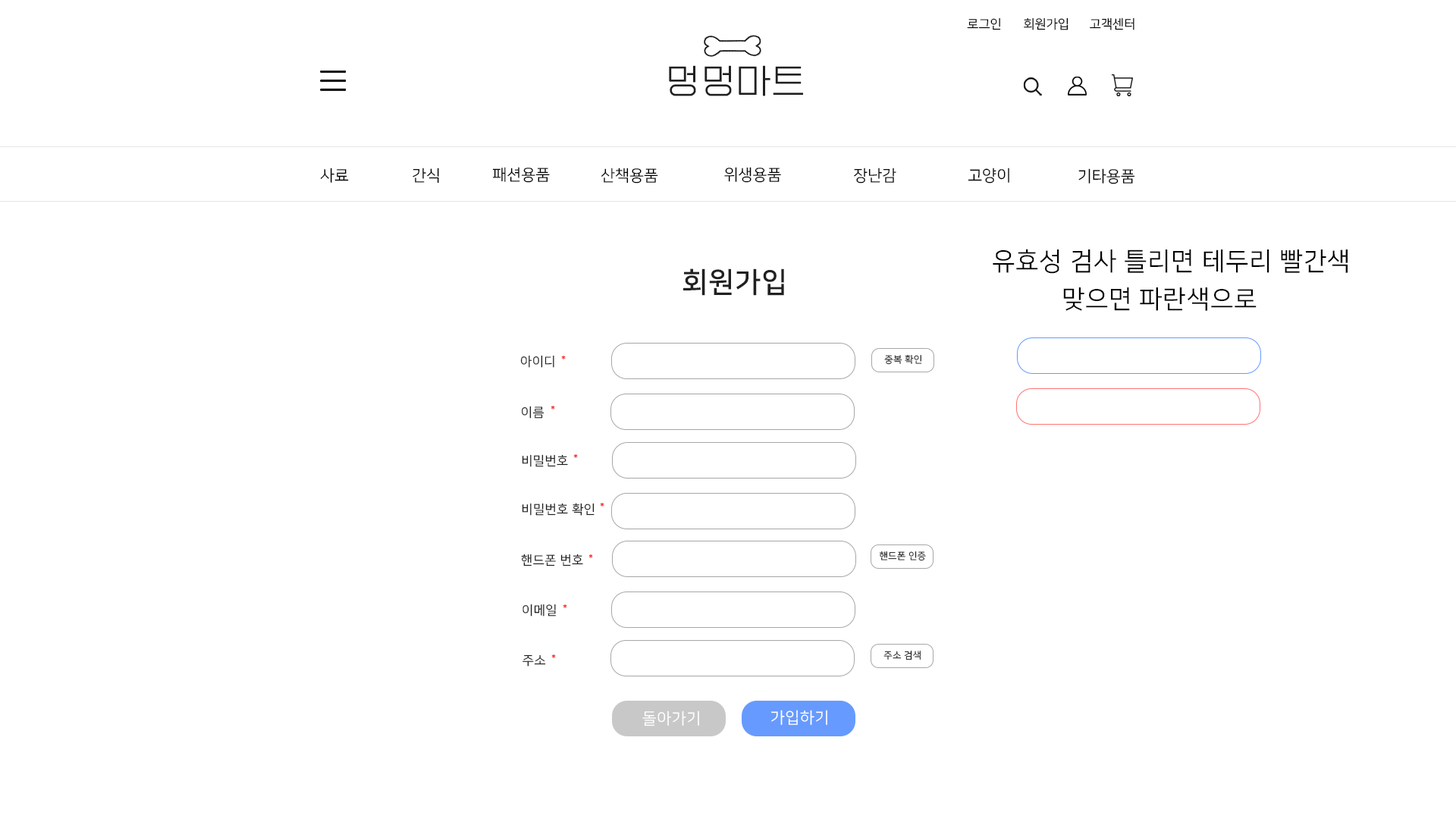
<style>
.page{position:relative;width:1456px;height:819px;background:#ffffff}
.page>*{position:absolute;margin:0}
.t1{font:12.6px "NanumSquareR";color:#000000}
.t2{font:34.8px "EF_watermelonSalad";letter-spacing:0.025em;color:#202020}
.t3{font:15.8px "NanumSquareR";color:#000000}
.t4{font:25.3px "NanumSquareR";letter-spacing:0.025em;color:#000000}
.t5{font:28.4px "NanumSquareB";letter-spacing:0.025em;color:#202020}
.t6{font:12.6px "NanumSquareR";letter-spacing:0.025em;color:#202020}
.t7{font:9.5px "NanumSquareR";letter-spacing:0.025em}
.t8{font:9.5px "NanumSquareR";letter-spacing:0.025em;color:#202020}
.t9{font:15.8px "NanumSquareR";letter-spacing:0.025em;color:#ffffff}
</style>
<div class="page">
<p class="t1" style="left:967px;top:17px;width:34px;height:13px">로그인</p>
<p class="t1" style="left:1024px;top:17px;width:44px;height:13px">회원가입</p>
<p class="t1" style="left:1090px;top:17px;width:44px;height:13px">고객센터</p>
<p class="t2" style="left:669px;top:65px;width:134px;height:31px">멍멍마트</p>
<p class="t3" style="left:320px;top:168px;width:29px;height:15px">사료</p>
<p class="t3" style="left:413px;top:168px;width:26px;height:16px">간식</p>
<p class="t3" style="left:492px;top:167px;width:58px;height:16px">패션용품</p>
<p class="t3" style="left:601px;top:168px;width:57px;height:16px">산책용품</p>
<p class="t3" style="left:724px;top:167px;width:57px;height:16px">위생용품</p>
<p class="t3" style="left:854px;top:168px;width:42px;height:16px">장난감</p>
<p class="t3" style="left:968px;top:168px;width:41px;height:16px">고양이</p>
<p class="t3" style="left:1078px;top:168px;width:57px;height:16px">기타용품</p>
<p class="t4" style="left:993px;top:249px;width:355px;height:62px;text-align:center">유효성 검사 틀리면 테두리 빨간색<br>맞으면 파란색으로</p>
<p class="t5" style="left:683px;top:268px;width:101px;height:28px">회원가입</p>
<p class="t6" style="left:520px;top:355px;width:34px;height:13px">아이디</p>
<p class="t7" style="left:561px;top:355px;width:5px;height:4px">*</p>
<p class="t7" style="left:884px;top:354px;width:38px;height:11px">중복 확인</p>
<p class="t6" style="left:522px;top:406px;width:22px;height:13px">이름</p>
<p class="t7" style="left:551px;top:405px;width:4px;height:4px">*</p>
<p class="t6" style="left:522px;top:454px;width:46px;height:13px">비밀번호</p>
<p class="t7" style="left:573px;top:453px;width:5px;height:5px">*</p>
<p class="t6" style="left:522px;top:503px;width:73px;height:13px">비밀번호 확인</p>
<p class="t7" style="left:600px;top:502px;width:4px;height:5px">*</p>
<p class="t6" style="left:521px;top:554px;width:62px;height:12px">핸드폰 번호</p>
<p class="t7" style="left:588px;top:554px;width:5px;height:4px">*</p>
<p class="t8" style="left:879px;top:551px;width:47px;height:10px">핸드폰 인증</p>
<p class="t6" style="left:522px;top:604px;width:34px;height:13px">이메일</p>
<p class="t7" style="left:563px;top:604px;width:4px;height:4px">*</p>
<p class="t7" style="left:551px;top:654px;width:5px;height:4px">*</p>
<p class="t8" style="left:883px;top:651px;width:38px;height:9px">주소 검색</p>
<p class="t6" style="left:522px;top:654px;width:24px;height:13px">주소</p>
<p class="t9" style="left:642px;top:711px;width:57px;height:15px">돌아가기</p>
<p class="t9" style="left:771px;top:710px;width:56px;height:15px">가입하기</p>
</div>
